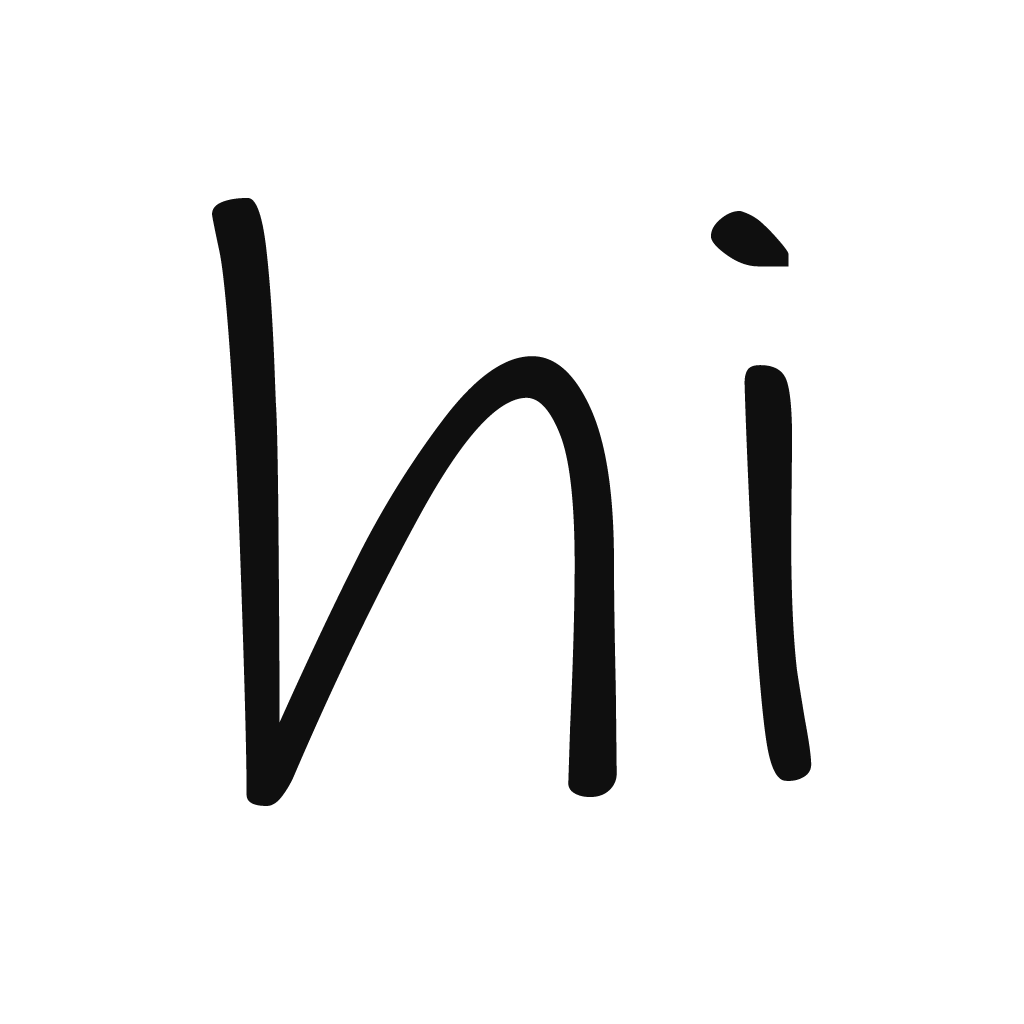
<style>
.page{position:relative;width:1024px;height:1024px;background:#ffffff}
.page>*{position:absolute;margin:0}
.t1{font:811.4px "InkFree";color:#0f0f0f;scale:1.12 1}
</style>
<div class="page">
<p class="t1" style="left:212px;top:198px;width:600px;height:608px">hi</p>
</div>
